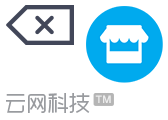
<style>
.page{position:relative;width:168px;height:120px;background:#ffffff}
.page>*{position:absolute;margin:0}
.t1{font:21.7px "RTWSYueGoDemo-Regular";color:#999b9f}
</style>
<div class="page">
<p class="t1" style="left:6px;top:93px;width:84px;height:20px">云网科技</p>
</div>
